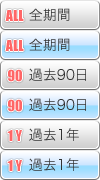
<style>
.page{position:relative;width:100px;height:180px}
.page>*{position:absolute;margin:0}
.t1{font:14px "Impact";color:#ff6666}
.t2{font:14px "HiraKakuProN-W3";color:#333333}
.t3{font:14px "HiraKakuPro-W3"}
.t4{font:14px "HiraKakuPro-W3";color:#333333}
</style>
<div class="page">
<p class="t1" style="left:5px;top:10px;width:19px;height:11px">ALL</p>
<p class="t2" style="left:29px;top:8px;width:41px;height:13px">全期間</p>
<p class="t1" style="left:5px;top:40px;width:19px;height:11px">ALL</p>
<p class="t3" style="left:29px;top:38px;width:41px;height:13px">全期間</p>
<p class="t1" style="left:8px;top:69px;width:14px;height:13px">90</p>
<p class="t2" style="left:29px;top:68px;width:57px;height:13px">過去90日</p>
<p class="t1" style="left:8px;top:99px;width:14px;height:13px">90</p>
<p class="t4" style="left:29px;top:98px;width:57px;height:13px">過去90日</p>
<p class="t1" style="left:7px;top:130px;width:15px;height:11px">1 Y</p>
<p class="t2" style="left:29px;top:128px;width:50px;height:13px">過去1年</p>
<p class="t1" style="left:7px;top:160px;width:15px;height:11px">1 Y</p>
<p class="t4" style="left:29px;top:158px;width:50px;height:13px">過去1年</p>
</div>
